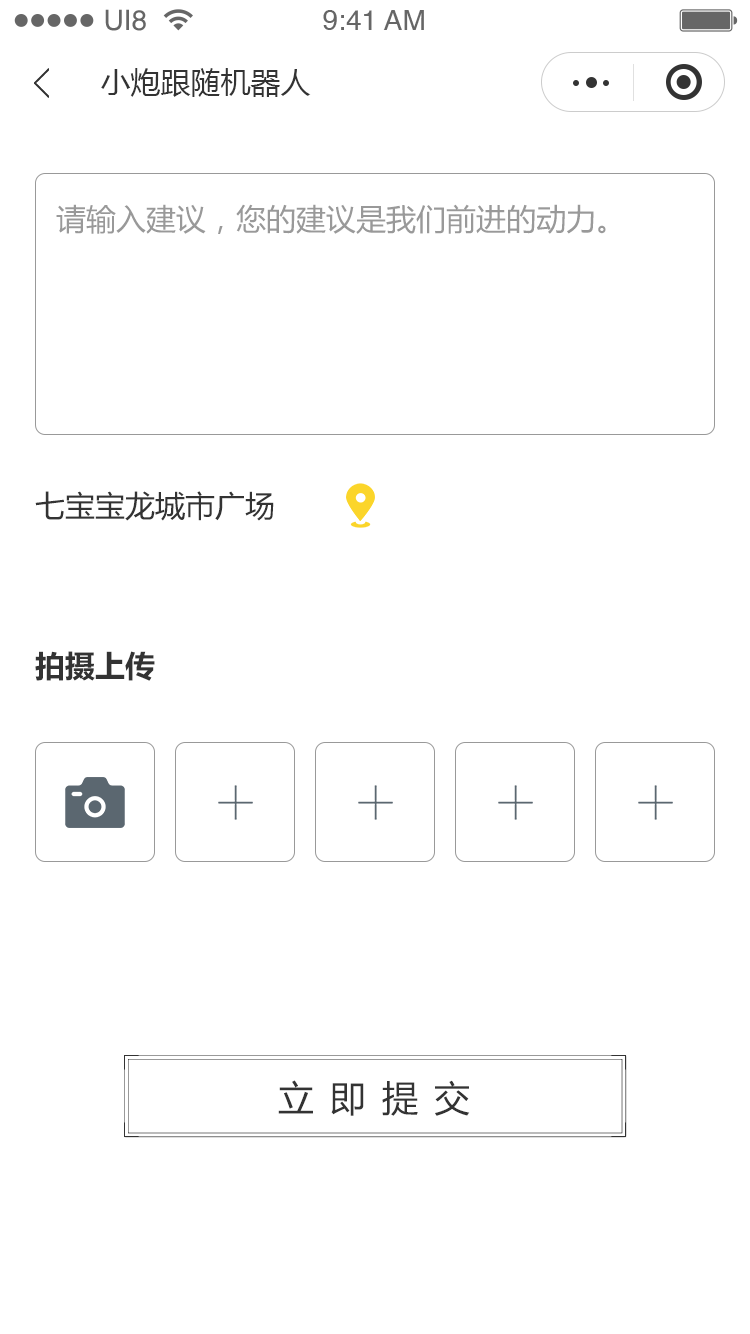
<style>
.page{position:relative;width:750px;height:1334px;background:#ffffff}
.page>*{position:absolute;margin:0}
.t1{font:28.1px "Helvetica";color:#666666}
.t2{font:30px "MicrosoftYaHei";color:#333333}
.t3{font:30px "MicrosoftYaHei";color:#999999}
.t4{font:30px "MicrosoftYaHei-Bold";color:#333333}
.t5{font:36.1px "MicrosoftYaHei";letter-spacing:0.44em;color:#333333}
</style>
<div class="page">
<p class="t1" style="left:105px;top:9px;width:41px;height:22px">UI8</p>
<p class="t1" style="left:323px;top:10px;width:101px;height:20px">9:41 AM</p>
<p class="t2" style="left:101px;top:68px;width:210px;height:29px">小炮跟随机器人</p>
<p class="t3" style="left:56px;top:204px;width:550px;height:30px">请输入建议，您的建议是我们前进的动力。</p>
<p class="t2" style="left:35px;top:491px;width:239px;height:30px">七宝宝龙城市广场</p>
<p class="t4" style="left:35px;top:651px;width:120px;height:30px">拍摄上传</p>
<p class="t5" style="left:278px;top:1080px;width:192px;height:36px">立即提交</p>
</div>
